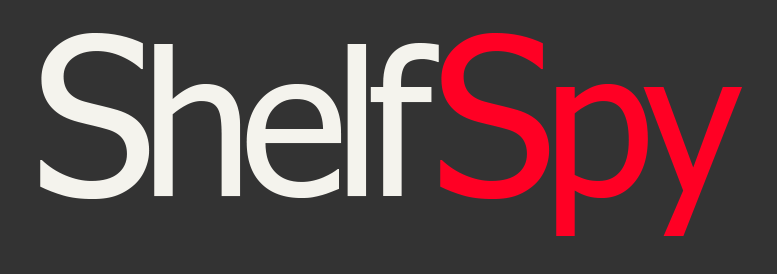
<style>
.page{position:relative;width:777px;height:274px;background:#333333}
.page>*{position:absolute;margin:0}
.t1{font:200px "Tahoma";letter-spacing:-0.06em;color:#f4f3ed}
.t2{font:220px "Tahoma";letter-spacing:-0.06em;color:#f4f3ed}
.t3{font:200px "Tahoma";color:#f4f3ed}
.t4{font:220px "Tahoma";letter-spacing:-0.05em;color:#ff0024}
.t5{font:200px "Tahoma";letter-spacing:-0.05em;color:#ff0024}
</style>
<div class="page">
<p class="t1" style="left:40px;top:33px;width:703px;height:203px"><span class="t2">S</span>hel<span class="t3">f</span><span class="t4">S</span><span class="t5">py</span></p>
</div>
